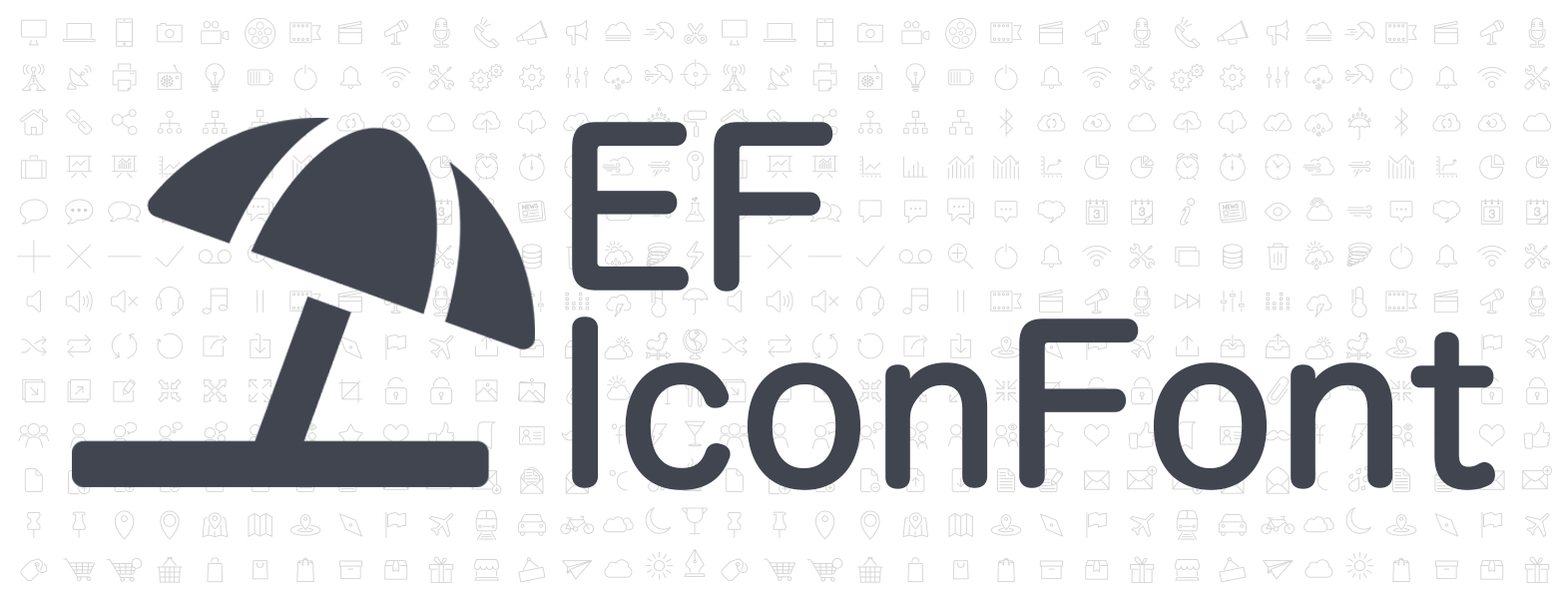
<style>
.page{position:relative;width:1568px;height:599px;background:#ffffff}
.page>*{position:absolute;margin:0}
.t1{font:209.6px/196.6px "HiraMaruPro-W4";color:#404550;font-weight:bold}
</style>
<div class="page">
<p class="t1" style="left:572px;top:122px;width:923px;height:368px">EF<br>IconFont</p>
</div>
